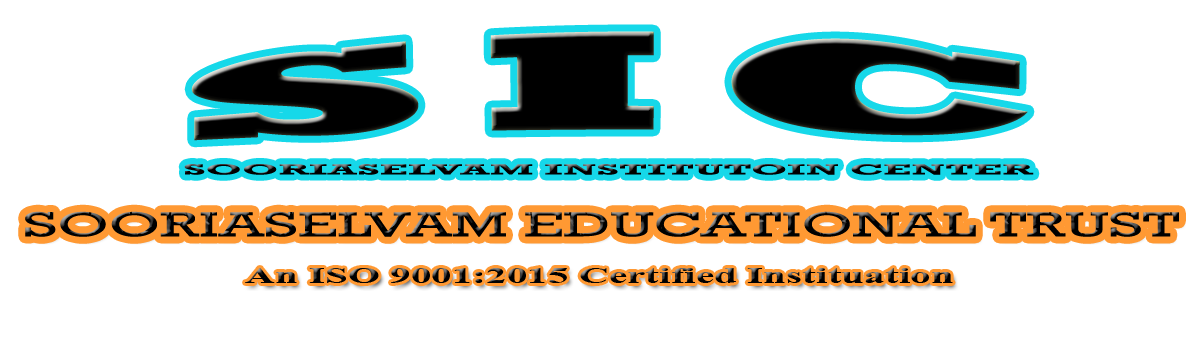
<style>
.page{position:relative;width:1200px;height:363px;background:#ffffff}
.page>*{position:absolute;margin:0}
.t1{font:100.8px "Rockwell-ExtraBold";letter-spacing:0.1em;color:#000000;scale:4.13 1}
.t2{font:15.1px "Rockwell-Bold";color:#000000;scale:2.81 1}
.t3{font:35.3px "Rockwell";color:#000000;scale:1.82 1}
.t4{font:22.7px "TimesNewRomanPS-BoldMT";color:#000000;scale:1.82 1}
</style>
<div class="page">
<p class="t1" style="left:191px;top:31px;width:837px;height:110px">SIC</p>
<p class="t2" style="left:184px;top:164px;width:850px;height:11px">SOORIASELVAM INSTITUTOIN CENTER</p>
<p class="t3" style="left:25px;top:211px;width:1154px;height:26px">SOORIASELVAM EDUCATIONAL TRUST</p>
<p class="t4" style="left:245px;top:268px;width:708px;height:15px">An ISO 9001:2015 Certified Instituation</p>
</div>
